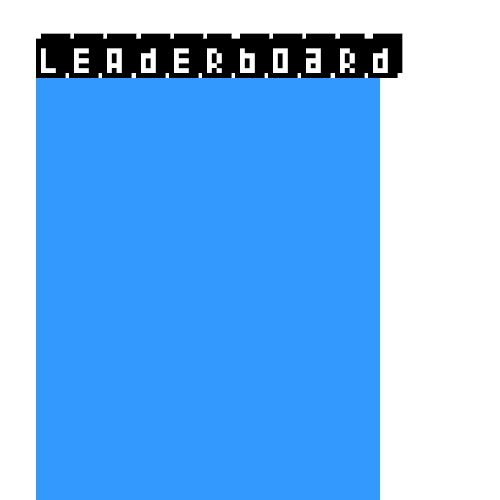
<style>
.page{position:relative;width:500px;height:500px;background:#3399ff}
.page>*{position:absolute;margin:0}
.t1{font:79px "Pixeliza20";letter-spacing:-0.08em;color:#000000}
</style>
<div class="page">
<p class="t1" style="left:36px;top:33px;width:367px;height:45px">LEAderboard</p>
</div>
